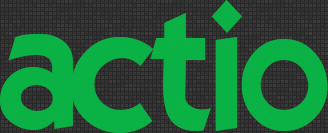
<style>
.page{position:relative;width:328px;height:133px;background:#0ab246}
.page>*{position:absolute;margin:0}
.t1{font:168px "ELEGANCE";color:#0ab246}
</style>
<div class="page">
<p class="t1" style="left:0px;top:0px;width:328px;height:133px">actio</p>
</div>
